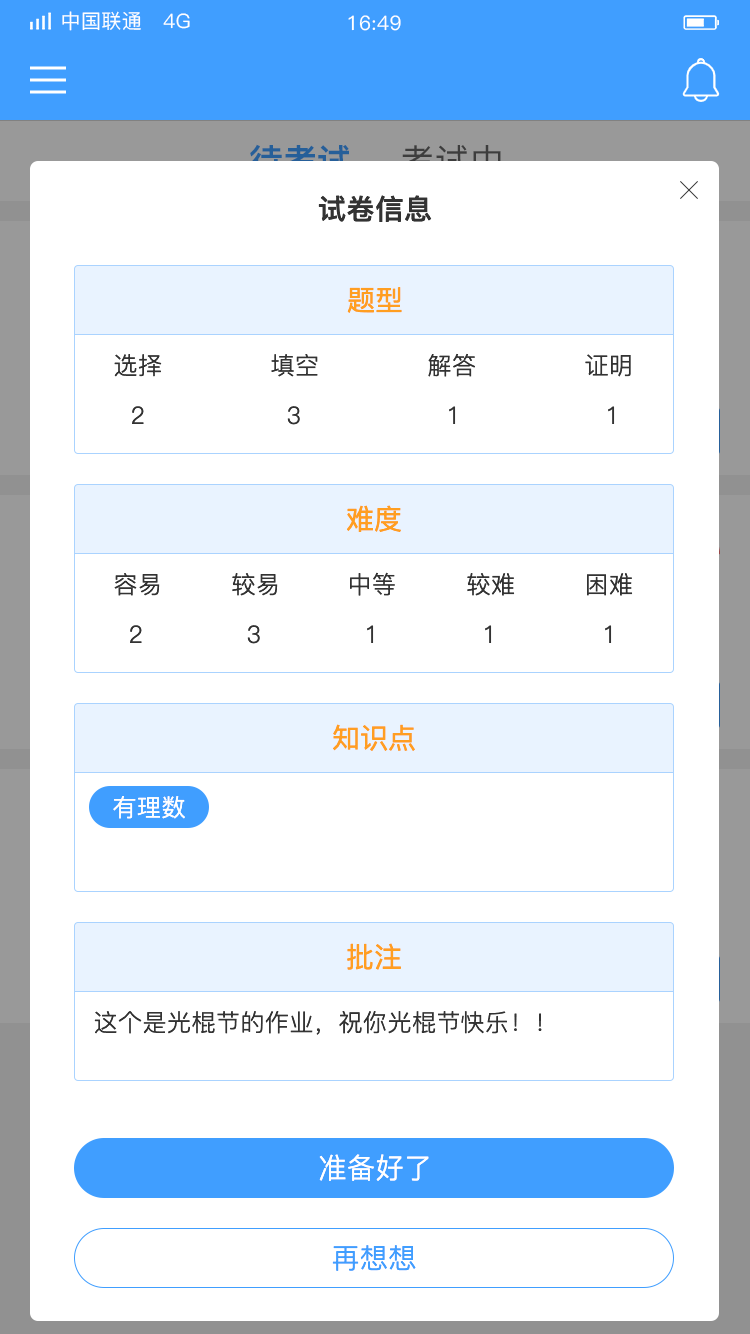
<style>
.page{position:relative;width:750px;height:1334px;background:#ffffff}
.page>*{position:absolute;margin:0}
.t1{font:20px "PingFang-SC-Medium";letter-spacing:0.02em;color:#ffffff}
.t2{font:34px "PingFang-SC-Heavy"}
.t3{font:28px "PingFang-SC-Bold";letter-spacing:0.02em;color:#333333}
.t4{font:28px "PingFang-SC-Medium";color:#ff9e21}
.t5{font:24px "PingFang-SC-Regular";letter-spacing:0.02em;color:#333333}
.t6{font:24px "PingFang-SC-Regular";letter-spacing:0.02em;color:#ffffff}
.t7{font:28px "PingFang-SC-Regular";letter-spacing:0.02em;color:#ffffff}
.t8{font:28px "PingFang-SC-Regular";letter-spacing:0.02em;color:#409eff}
</style>
<div class="page">
<p class="t1" style="left:62px;top:11px;width:128px;height:20px">中国联通   4G</p>
<p class="t1" style="left:348px;top:15px;width:53px;height:16px">16:49</p>
<p class="t2" style="left:250px;top:144px;width:101px;height:33px">待考试</p>
<p class="t3" style="left:318px;top:195px;width:114px;height:27px">试卷信息</p>
<p class="t4" style="left:347px;top:287px;width:55px;height:26px">题型</p>
<p class="t5" style="left:428px;top:353px;width:47px;height:24px">解答</p>
<p class="t5" style="left:114px;top:354px;width:48px;height:23px">选择</p>
<p class="t5" style="left:271px;top:354px;width:47px;height:23px">填空</p>
<p class="t5" style="left:585px;top:354px;width:46px;height:23px">证明</p>
<p class="t5" style="left:132px;top:406px;width:12px;height:18px">2</p>
<p class="t5" style="left:287px;top:406px;width:13px;height:19px">3</p>
<p class="t5" style="left:449px;top:406px;width:7px;height:18px">1</p>
<p class="t5" style="left:608px;top:406px;width:7px;height:18px">1</p>
<p class="t4" style="left:347px;top:505px;width:54px;height:27px">难度</p>
<p class="t5" style="left:114px;top:573px;width:46px;height:23px">容易</p>
<p class="t5" style="left:232px;top:573px;width:46px;height:23px">较易</p>
<p class="t5" style="left:350px;top:572px;width:45px;height:24px">中等</p>
<p class="t5" style="left:467px;top:573px;width:48px;height:23px">较难</p>
<p class="t5" style="left:587px;top:573px;width:46px;height:23px">困难</p>
<p class="t5" style="left:130px;top:625px;width:12px;height:18px">2</p>
<p class="t5" style="left:247px;top:625px;width:13px;height:19px">3</p>
<p class="t5" style="left:367px;top:625px;width:7px;height:18px">1</p>
<p class="t5" style="left:485px;top:625px;width:7px;height:18px">1</p>
<p class="t5" style="left:605px;top:625px;width:7px;height:18px">1</p>
<p class="t4" style="left:333px;top:724px;width:82px;height:27px">知识点</p>
<p class="t6" style="left:113px;top:796px;width:72px;height:23px">有理数</p>
<p class="t4" style="left:347px;top:943px;width:54px;height:27px">批注</p>
<p class="t5" style="left:94px;top:1011px;width:448px;height:24px">这个是光棍节的作业，祝你光棍节快乐！！</p>
<p class="t7" style="left:319px;top:1154px;width:110px;height:27px">准备好了</p>
<p class="t8" style="left:332px;top:1245px;width:84px;height:26px">再想想</p>
</div>
